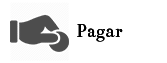
<style>
.page{position:relative;width:167px;height:63px;background:#ffffff}
.page>*{position:absolute;margin:0}
.t1{font:20px "BenthamRegular";color:#000000}
</style>
<div class="page">
<p class="t1" style="left:77px;top:24px;width:46px;height:18px">Pagar</p>
<p class="t1" style="left:77px;top:24px;width:46px;height:18px">Pagar</p>
</div>
